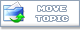
<style>
.page{position:relative;width:80px;height:30px;background:#ffffff}
.page>*{position:absolute;margin:0}
.t1{font:8px "04b11";color:#ffffff}
</style>
<div class="page">
<p class="t1" style="left:36px;top:6px;width:32px;height:15px;text-align:center">MOVE<br>TOPIC</p>
</div>
